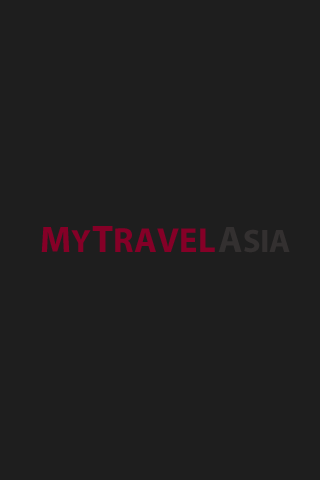
<style>
.page{position:relative;width:320px;height:480px;background:#1e1e1e}
.page>*{position:absolute;margin:0}
.t1{font:36.9px "MyriadPro-Bold";color:#850027}
.t2{font:32.4px "MyriadPro-Bold";color:#850027}
.t3{font:34.8px "MyriadPro-Bold";color:#850027}
.t4{font:38.7px "MyriadPro-Bold";color:#850027}
.t5{font:32.5px "MyriadPro-Bold";color:#333030}
.t6{font:37.1px "MyriadPro-Bold";color:#333030}
</style>
<div class="page">
<p class="t1" style="left:41px;top:227px;width:50px;height:25px">M<span class="t2">Y</span></p>
<p class="t3" style="left:92px;top:226px;width:123px;height:26px"><span class="t4">T</span>RAVEL</p>
<p class="t5" style="left:218px;top:227px;width:72px;height:26px"><span class="t6">A</span>SIA</p>
</div>
